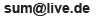
<style>
.page{position:relative;width:98px;height:17px;background:#ffffff}
.page>*{position:absolute;margin:0}
.t1{font:14px "Arial-BoldMT";color:#222222}
</style>
<div class="page">
<p class="t1" style="left:4px;top:3px;width:86px;height:13px">sum@live.de</p>
</div>
